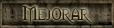
<style>
.page{position:relative;width:114px;height:28px}
.page>*{position:absolute;margin:0}
.t1{font:19px "Morpheus"}
</style>
<div class="page">
<p class="t1" style="left:22px;top:5px;width:72px;height:19px">Mejorar</p>
</div>
